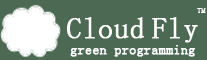
<style>
.page{position:relative;width:207px;height:60px;background:#4c6953}
.page>*{position:absolute;margin:0}
.t1{font:30px "NSimSun";color:#ffffff;font-weight:bold}
.t2{font:8px "NSimSun";color:#ffffff;font-weight:bold}
.t3{font:14px "NSimSun";color:#ffffff;font-weight:bold}
</style>
<div class="page">
<p class="t1" style="left:67px;top:17px;width:131px;height:26px">Cloud Fly</p>
<p class="t2" style="left:197px;top:8px;width:9px;height:5px">TM</p>
<p class="t3" style="left:70px;top:45px;width:125px;height:12px">green programming</p>
</div>
